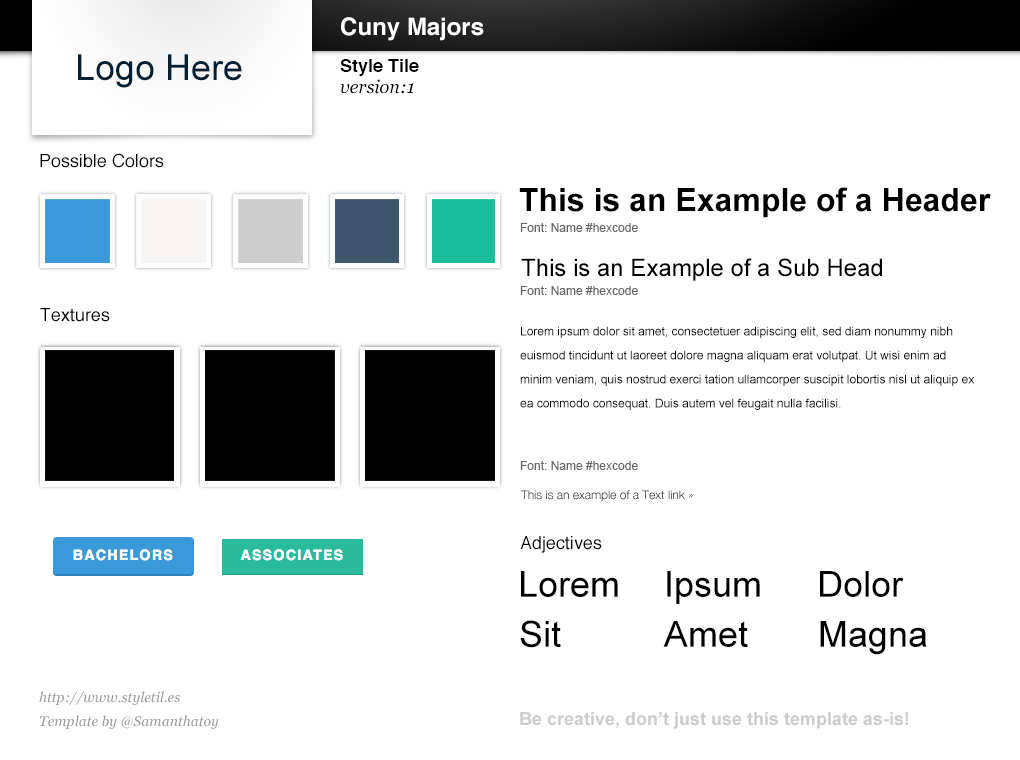
<style>
.page{position:relative;width:1020px;height:760px;background:#ffffff}
.page>*{position:absolute;margin:0}
.t1{font:24px "Helvetica-Bold";color:#ffffff}
.t2{font:36px "ArialMT";color:#002035}
.t3{font:18px "Helvetica-Bold";color:#000000}
.t4{font:18px "Georgia-Italic";color:#000000}
.t5{font:18px "Helvetica";color:#000000}
.t6{font:32px "Arial-BoldMT";color:#000000}
.t7{font:12px "ArialMT";color:#666666}
.t8{font:24px "ArialMT";color:#000000}
.t9{font:12px/24px "ArialMT";color:#000000}
.t10{font:12px "HelveticaNeue-Light"}
.t11{font:36px "ArialMT";color:#000000}
.t12{font:14px/24px "Georgia-Italic";color:#999999}
.t13{font:18px "Arial-BoldMT";color:#cccccc}
</style>
<div class="page">
<p class="t1" style="left:341px;top:17px;width:143px;height:24px">Cuny Majors</p>
<p class="t2" style="left:78px;top:54px;width:164px;height:34px">Logo Here</p>
<p class="t3" style="left:340px;top:59px;width:79px;height:17px">Style Tile</p>
<p class="t4" style="left:340px;top:79px;width:74px;height:15px">version:1</p>
<p class="t5" style="left:40px;top:153px;width:124px;height:15px">Possible Colors</p>
<p class="t6" style="left:519px;top:187px;width:472px;height:31px">This is an Example of a Header</p>
<p class="t7" style="left:520px;top:223px;width:118px;height:9px">Font: Name #hexcode</p>
<p class="t8" style="left:521px;top:258px;width:361px;height:23px">This is an Example of a Sub Head</p>
<p class="t7" style="left:520px;top:286px;width:118px;height:9px">Font: Name #hexcode</p>
<p class="t5" style="left:40px;top:308px;width:70px;height:14px">Textures</p>
<p class="t9" style="left:520px;top:326px;width:455px;height:84px">Lorem ipsum dolor sit amet, consectetuer adipiscing elit, sed diam nonummy nibh euismod tincidunt ut laoreet dolore magna aliquam erat volutpat. Ut wisi enim ad minim veniam, quis nostrud exerci tation ullamcorper suscipit lobortis nisl ut aliquip ex ea commodo consequat. Duis autem vel feugait nulla facilisi.</p>
<p class="t7" style="left:520px;top:461px;width:118px;height:9px">Font: Name #hexcode</p>
<p class="t10" style="left:521px;top:490px;width:172px;height:12px">This is an example of a Text link »</p>
<p class="t5" style="left:520px;top:536px;width:82px;height:17px">Adjectives</p>
<p class="t11" style="left:521px;top:571px;width:97px;height:26px">Lorem</p>
<p class="t11" style="left:667px;top:571px;width:93px;height:33px">Ipsum</p>
<p class="t11" style="left:820px;top:571px;width:84px;height:26px">Dolor</p>
<p class="t11" style="left:520px;top:620px;width:41px;height:28px">Sit</p>
<p class="t11" style="left:663px;top:621px;width:85px;height:26px">Amet</p>
<p class="t11" style="left:820px;top:621px;width:107px;height:34px">Magna</p>
<p class="t12" style="left:39px;top:691px;width:180px;height:38px">http://www.styletil.es<br>Template by @Samanthatoy</p>
<p class="t13" style="left:520px;top:712px;width:388px;height:17px">Be creative, don’t just use this template as-is!</p>
</div>
